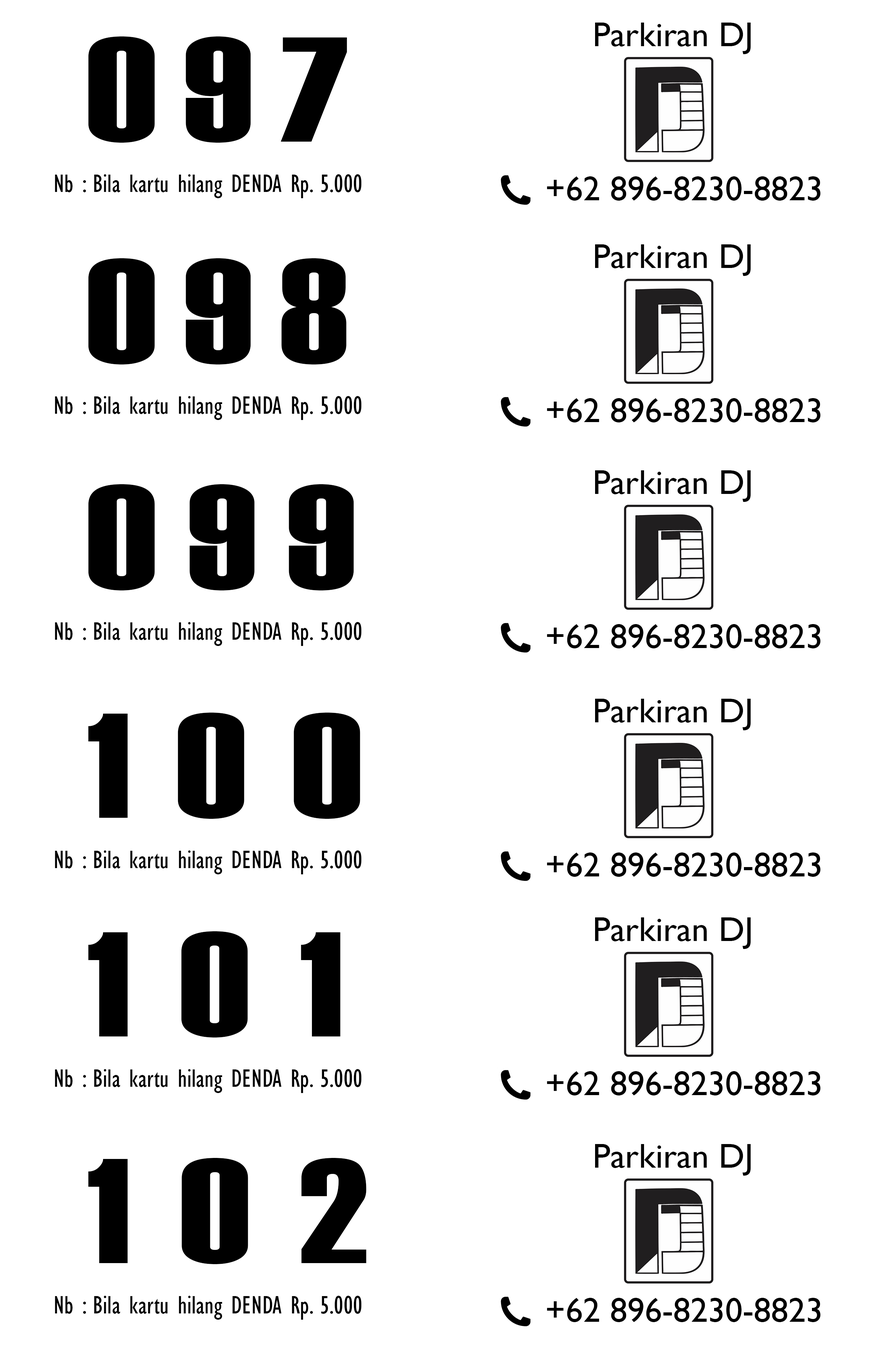
<style>
.page{position:relative;width:881px;height:1353px;background:#ffffff}
.page>*{position:absolute;margin:0}
.t1{font:34.7px "GillSansMT";color:#000000}
.t2{font:149px "Haettenschweiler";letter-spacing:0.14em;color:#000000;scale:1.24 1}
.t3{font:26px "GillSansMT-Condensed";color:#000000}
.t4{font:149px "Haettenschweiler";letter-spacing:0.16em;color:#000000;scale:1.24 1}
.t5{font:149px "Haettenschweiler";letter-spacing:0.24em;color:#000000;scale:1.24 1}
.t6{font:149px "Haettenschweiler";letter-spacing:0.26em;color:#000000;scale:1.24 1}
.t7{font:149px "Haettenschweiler";letter-spacing:0.262em;color:#000000;scale:1.24 1}
</style>
<div class="page">
<p class="t1" style="left:595px;top:23px;width:156px;height:31px">Parkiran DJ</p>
<p class="t2" style="left:88px;top:36px;width:259px;height:107px">097</p>
<p class="t3" style="left:55px;top:174px;width:307px;height:24px">Nb : Bila kartu hilang DENDA Rp. 5.000</p>
<p class="t1" style="left:547px;top:176px;width:274px;height:25px">+62 896-8230-8823</p>
<p class="t1" style="left:595px;top:244px;width:156px;height:32px">Parkiran DJ</p>
<p class="t2" style="left:88px;top:258px;width:259px;height:106px">098</p>
<p class="t3" style="left:55px;top:396px;width:307px;height:24px">Nb : Bila kartu hilang DENDA Rp. 5.000</p>
<p class="t1" style="left:547px;top:398px;width:274px;height:24px">+62 896-8230-8823</p>
<p class="t1" style="left:595px;top:470px;width:156px;height:32px">Parkiran DJ</p>
<p class="t4" style="left:88px;top:484px;width:266px;height:106px">099</p>
<p class="t3" style="left:55px;top:622px;width:307px;height:24px">Nb : Bila kartu hilang DENDA Rp. 5.000</p>
<p class="t1" style="left:547px;top:624px;width:274px;height:24px">+62 896-8230-8823</p>
<p class="t1" style="left:595px;top:699px;width:156px;height:31px">Parkiran DJ</p>
<p class="t5" style="left:88px;top:712px;width:272px;height:107px">100</p>
<p class="t3" style="left:55px;top:850px;width:307px;height:24px">Nb : Bila kartu hilang DENDA Rp. 5.000</p>
<p class="t1" style="left:547px;top:852px;width:274px;height:25px">+62 896-8230-8823</p>
<p class="t1" style="left:595px;top:917px;width:156px;height:32px">Parkiran DJ</p>
<p class="t6" style="left:88px;top:931px;width:253px;height:107px">101</p>
<p class="t3" style="left:55px;top:1069px;width:307px;height:24px">Nb : Bila kartu hilang DENDA Rp. 5.000</p>
<p class="t1" style="left:547px;top:1071px;width:274px;height:24px">+62 896-8230-8823</p>
<p class="t1" style="left:595px;top:1144px;width:156px;height:32px">Parkiran DJ</p>
<p class="t7" style="left:88px;top:1158px;width:279px;height:106px">102</p>
<p class="t3" style="left:55px;top:1296px;width:307px;height:24px">Nb : Bila kartu hilang DENDA Rp. 5.000</p>
<p class="t1" style="left:547px;top:1298px;width:274px;height:24px">+62 896-8230-8823</p>
</div>
